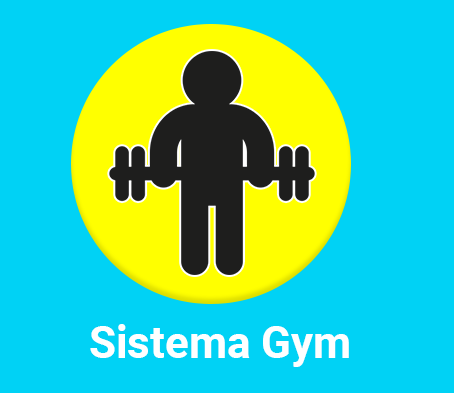
<style>
.page{position:relative;width:454px;height:393px;background:#00d2f5}
.page>*{position:absolute;margin:0}
.t1{font:44px "Roboto-Bold";color:#feffff}
</style>
<div class="page">
<p class="t1" style="left:90px;top:324px;width:259px;height:43px">Sistema Gym</p>
</div>
